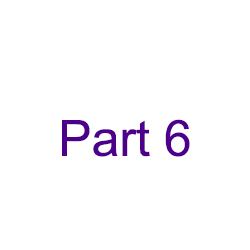
<style>
.page{position:relative;width:250px;height:250px;background:#ffffff}
.page>*{position:absolute;margin:0}
.t1{font:50px "ArialMT";color:#4d008c}
</style>
<div class="page">
<p class="t1" style="left:62px;top:119px;width:128px;height:38px">Part 6</p>
</div>
